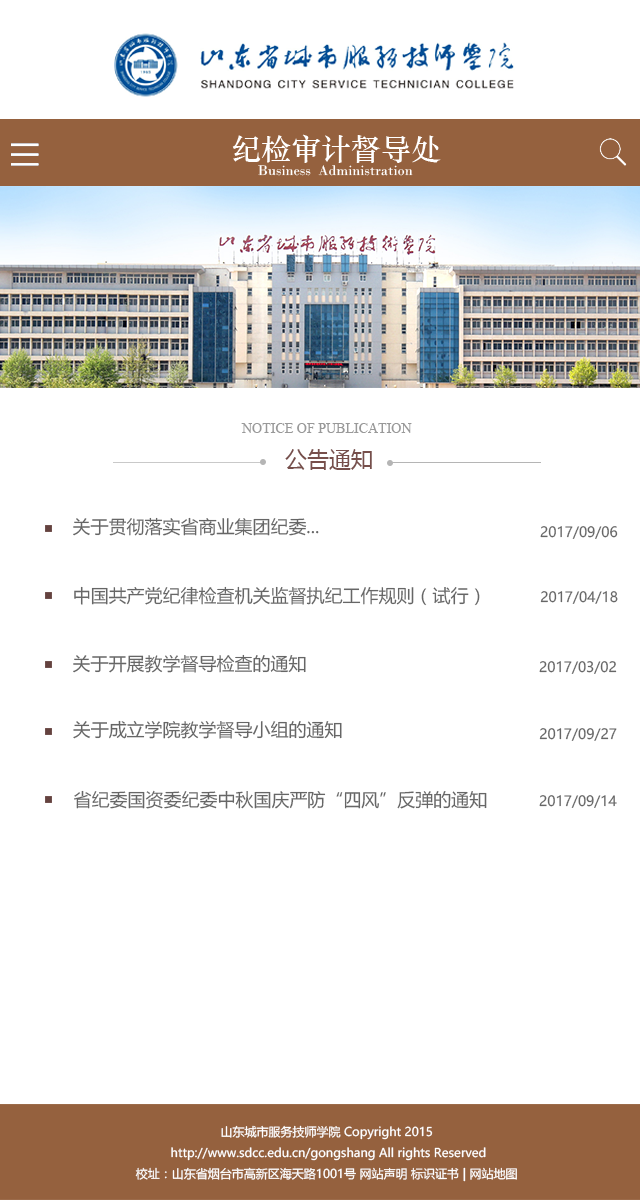
<style>
.page{position:relative;width:640px;height:1200px;background:#ffffff}
.page>*{position:absolute;margin:0}
.t1{font:30px "STZhongsong";color:#ffffff}
.t2{font:14.7px "BodoniMT";color:#ffffff}
.t3{font:14px "TimesNewRomanPSMT";color:#999999;text-transform:uppercase}
.t4{font:22px "MicrosoftYaHei";color:#774f4b}
.t5{font:18px "MicrosoftYaHei";color:#666666}
.t6{font:14px "MicrosoftYaHei";color:#666666}
.t7{font:12px "MicrosoftYaHei";color:#ffffff}
</style>
<div class="page">
<p class="t1" style="left:232px;top:134px;width:209px;height:29px">纪检审计督导处</p>
<p class="t2" style="left:258px;top:165px;width:155px;height:11px">Business  Administration  School</p>
<p class="t3" style="left:241px;top:423px;width:171px;height:10px">NOTICE OF PUBLICATION</p>
<p class="t4" style="left:285px;top:449px;width:87px;height:21px">公告通知</p>
<p class="t5" style="left:73px;top:517px;width:246px;height:19px">关于贯彻落实省商业集团纪委...</p>
<p class="t6" style="left:540px;top:526px;width:78px;height:13px">2017/09/06</p>
<p class="t5" style="left:74px;top:586px;width:406px;height:20px">中国共产党纪律检查机关监督执纪工作规则（试行）</p>
<p class="t6" style="left:540px;top:591px;width:78px;height:13px">2017/04/18</p>
<p class="t5" style="left:73px;top:654px;width:233px;height:19px">关于开展教学督导检查的通知</p>
<p class="t6" style="left:539px;top:661px;width:78px;height:13px">2017/03/02</p>
<p class="t5" style="left:73px;top:720px;width:269px;height:19px">关于成立学院教学督导小组的通知</p>
<p class="t6" style="left:539px;top:728px;width:78px;height:13px">2017/09/27</p>
<p class="t5" style="left:74px;top:790px;width:413px;height:19px">省纪委国资委纪委中秋国庆严防“四风”反弹的通知</p>
<p class="t6" style="left:539px;top:795px;width:78px;height:13px">2017/09/14</p>
<p class="t7" style="left:135px;top:1125px;width:382px;height:57px;text-align:center">山东城市服务技师学院 Copyright 2015<br> http://www.sdcc.edu.cn/gongshang All rights Reserved<br>校址：山东省烟台市高新区海天路1001号 网站声明 标识证书 | 网站地图</p>
</div>
